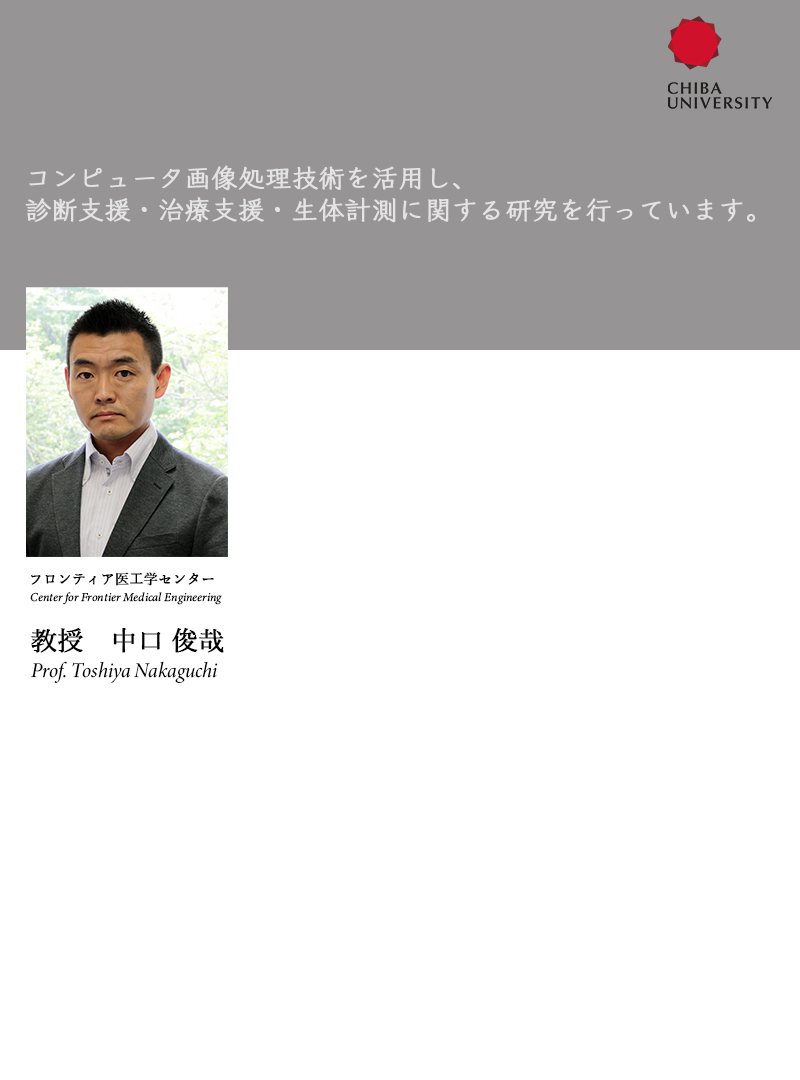
<style>
.page{position:relative;width:800px;height:1080px;background:#ffffff}
.page>*{position:absolute;margin:0}
.t1{font:26px/32px "KleePro-M";color:#e4e4e4;font-weight:bold}
.t2{font:14px "YuMincho-Regular";color:#000000;font-weight:bold}
.t3{font:12px "MinionVariableConcept-Italic";color:#000000;font-weight:bold}
.t4{font:26px "YuMincho-Regular";color:#000000;font-weight:bold}
.t5{font:21px "MinionConceptItalic-DisplayMediumItalic";color:#000000;font-weight:bold}
</style>
<div class="page">
<p class="t1" style="left:25px;top:165px;width:731px;height:58px">コンピュータ画像処理技術を活用し、<br>診断支援・治療支援・生体計測に関する研究を行っています。</p>
<p class="t2" style="left:31px;top:572px;width:183px;height:14px">フロンティア医工学センター</p>
<p class="t3" style="left:30px;top:592px;width:192px;height:13px">Center for Frontier Medical Engineering</p>
<p class="t4" style="left:31px;top:628px;width:193px;height:25px">教授　中口 俊哉</p>
<p class="t5" style="left:31px;top:661px;width:187px;height:22px">Prof. Toshiya Nakaguchi</p>
</div>
